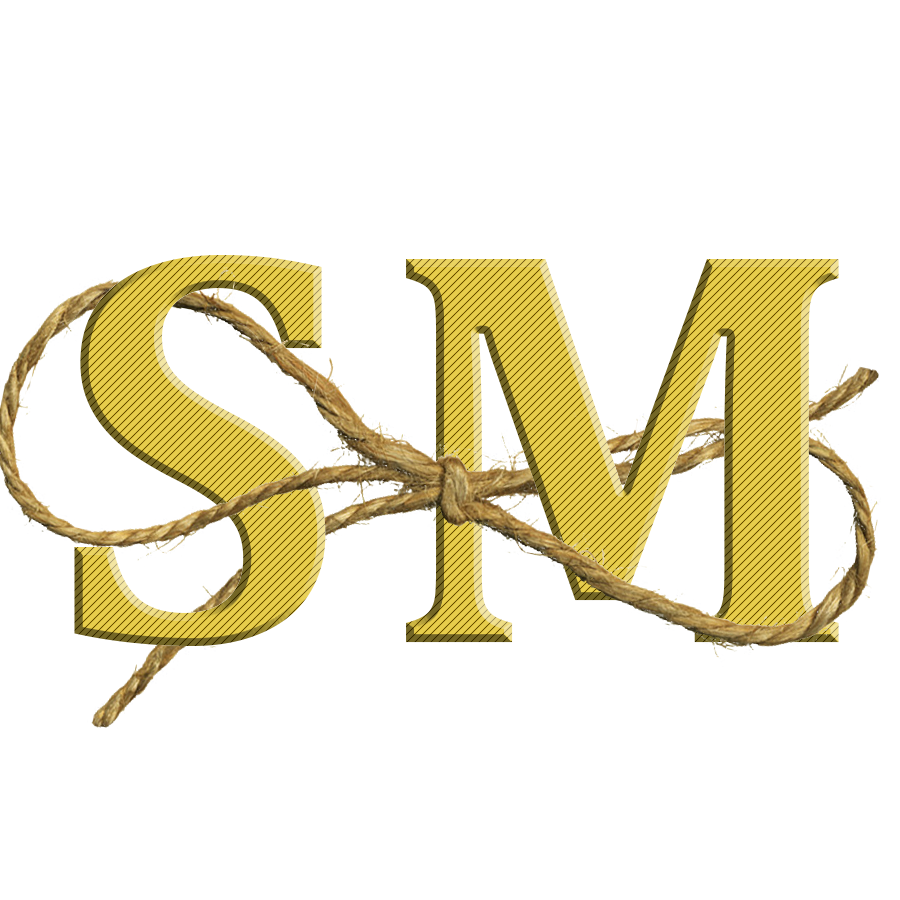
<style>
.page{position:relative;width:900px;height:900px;background:#ffffff}
.page>*{position:absolute;margin:0}
.t1{font:574px "Cambria-Bold";letter-spacing:0.06em}
</style>
<div class="page">
<p class="t1" style="left:74px;top:255px;width:765px;height:391px">SM</p>
</div>
